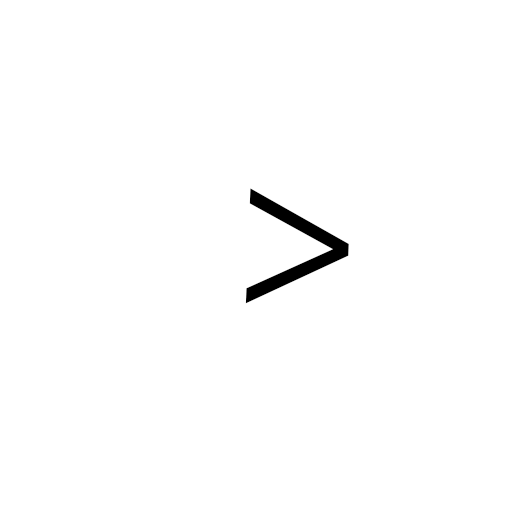
<style>
.page{position:relative;width:512px;height:512px;background:#ffffff}
.page>*{position:absolute;margin:0}
.t1{font:215.9px "MyriadPro-Regular";color:#000000}
</style>
<div class="page">
<p class="t1" style="left:245px;top:188px;width:104px;height:116px;rotate:-178deg">&lt;</p>
</div>
